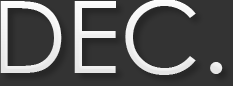
<style>
.page{position:relative;width:233px;height:86px;background:#333333}
.page>*{position:absolute;margin:0}
.t1{font:100px "CenturyGothic";color:#ffffff}
</style>
<div class="page">
<p class="t1" style="left:0px;top:0px;width:223px;height:75px">DEC.</p>
</div>
